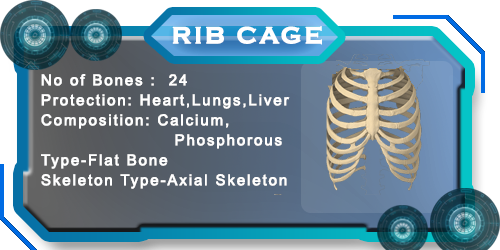
<style>
.page{position:relative;width:500px;height:250px}
.page>*{position:absolute;margin:0}
.t1{font:24px "CopperplateGothic-Bold";letter-spacing:0.1em;color:#ffffff;font-weight:bold}
.t2{font:15px/20px "ArialMT";letter-spacing:0.1em;color:#ffffff;font-weight:bold}
</style>
<div class="page">
<p class="t1" style="left:172px;top:26px;width:150px;height:19px">RIB CAGE</p>
<p class="t2" style="left:41px;top:74px;width:249px;height:115px">No of Bones :  24 <br>Protection: Heart,Lungs,Liver<br>Composition: Calcium,<br>                      Phosphorous<br>Type-Flat Bone<br>Skeleton Type-Axial Skeleton</p>
</div>
